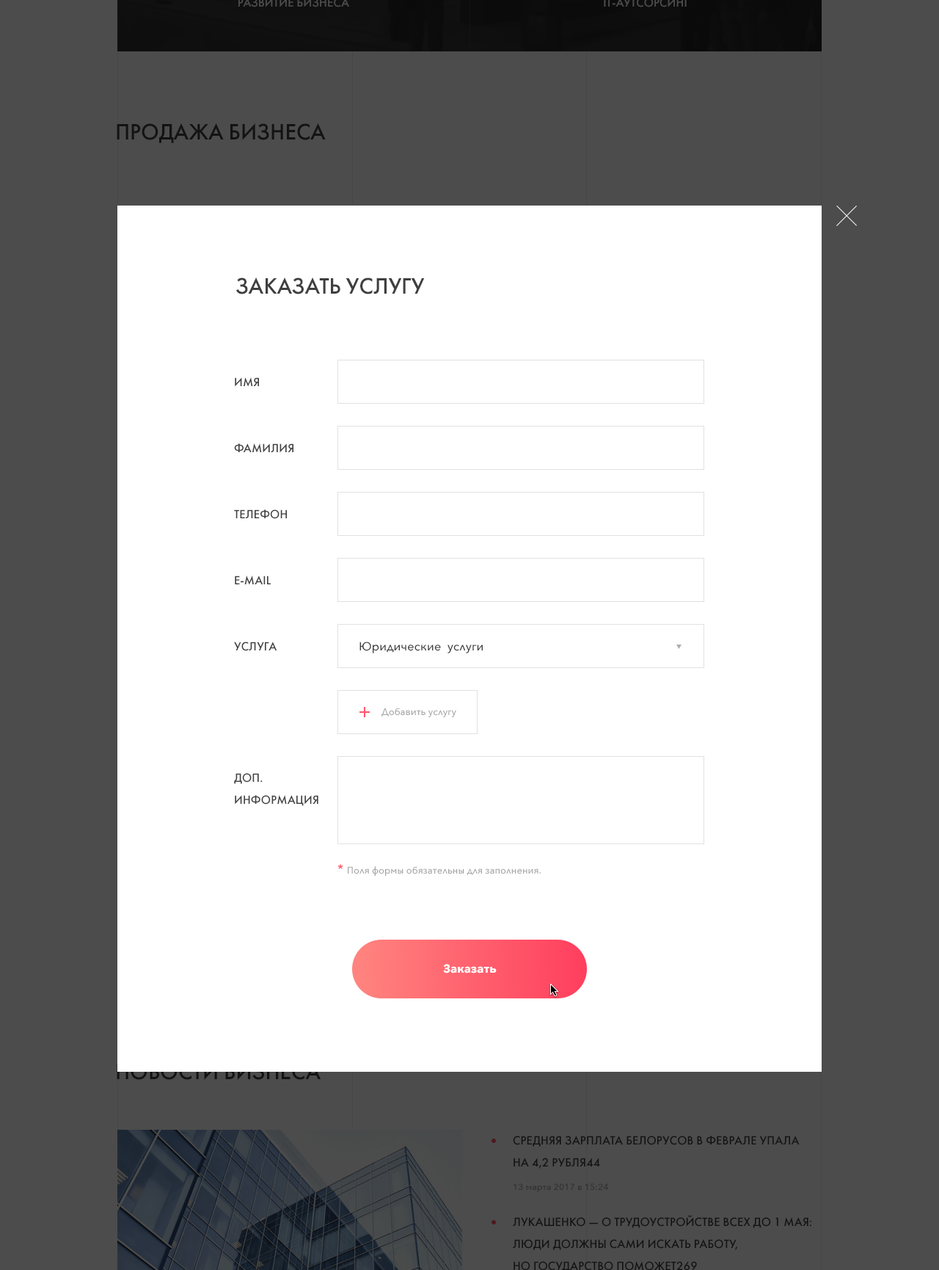
<style>
.page{position:relative;width:939px;height:1270px;background:#ffffff}
.page>*{position:absolute;margin:0}
.t1{font:22px "FuturaFuturisC";color:#3f3f3f;text-transform:uppercase}
.t2{font:11.7px "FuturaFuturisC";letter-spacing:0.01em;color:#3f3f3f;text-transform:uppercase}
.t3{font:11.7px "AvenirNext-Medium";letter-spacing:0.01em;color:#3f3f3f}
.t4{font:9.5px "AvenirNext-Medium";letter-spacing:0.01em;color:#a5a5a5}
.t5{font:11.7px/22px "FuturaFuturisC";letter-spacing:0.01em;color:#3f3f3f;text-transform:uppercase}
.t6{font:13.2px "AvenirNext-Medium";letter-spacing:0.01em;color:#ff5669}
.t7{font:11.7px "AvenirNext-Bold";letter-spacing:0.01em;color:#ffffff}
</style>
<div class="page">
<p class="t1" style="left:236px;top:277px;width:189px;height:17px">Заказать услугу</p>
<p class="t2" style="left:235px;top:377px;width:24px;height:10px">Имя</p>
<p class="t2" style="left:234px;top:443px;width:60px;height:10px">Фамилия</p>
<p class="t2" style="left:234px;top:509px;width:53px;height:10px">Телефон</p>
<p class="t2" style="left:235px;top:575px;width:36px;height:10px">E-mail</p>
<p class="t2" style="left:234px;top:641px;width:43px;height:10px">Услуга</p>
<p class="t3" style="left:360px;top:641px;width:123px;height:12px">Юридические  услуги</p>
<p class="t4" style="left:382px;top:707px;width:74px;height:10px">Добавить услугу</p>
<p class="t5" style="left:234px;top:773px;width:84px;height:33px">Доп.<br>информация</p>
<p class="t4" style="left:338px;top:864px;width:203px;height:12px"><span class="t6">* </span>Поля формы обязательны для заполнения.</p>
<p class="t7" style="left:443px;top:964px;width:54px;height:9px">Заказать</p>
</div>
